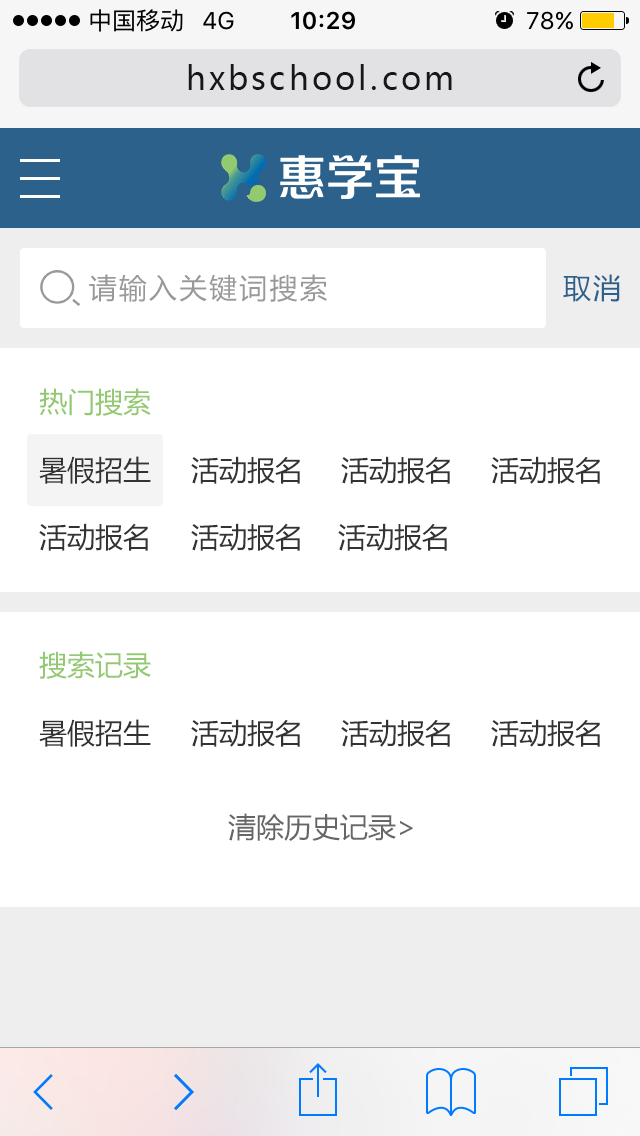
<style>
.page{position:relative;width:640px;height:1136px;background:#ffffff}
.page>*{position:absolute;margin:0}
.t1{font:32px "MicrosoftYaHei";letter-spacing:0.1em;color:#171717}
.t2{font:28px "MicrosoftYaHei";letter-spacing:0.075em;color:#999999}
.t3{font:28px "MicrosoftYaHei";letter-spacing:0.075em;color:#2c618b}
.t4{font:28px "MicrosoftYaHei";color:#93c971}
.t5{font:28px "MicrosoftYaHei";color:#333333}
.t6{font:28px "MicrosoftYaHei";color:#666666}
</style>
<div class="page">
<p class="t1" style="left:188px;top:64px;width:264px;height:26px">hxbschool.com</p>
<p class="t2" style="left:89px;top:274px;width:238px;height:28px">请输入关键词搜索</p>
<p class="t3" style="left:563px;top:274px;width:57px;height:28px">取消</p>
<p class="t4" style="left:39px;top:388px;width:112px;height:28px">热门搜索</p>
<p class="t5" style="left:39px;top:456px;width:112px;height:28px">暑假招生</p>
<p class="t5" style="left:191px;top:456px;width:109px;height:28px">活动报名</p>
<p class="t5" style="left:341px;top:456px;width:109px;height:28px">活动报名</p>
<p class="t5" style="left:491px;top:456px;width:109px;height:28px">活动报名</p>
<p class="t5" style="left:39px;top:523px;width:109px;height:28px">活动报名</p>
<p class="t5" style="left:191px;top:523px;width:109px;height:28px">活动报名</p>
<p class="t5" style="left:338px;top:523px;width:109px;height:28px">活动报名</p>
<p class="t4" style="left:39px;top:651px;width:112px;height:28px">搜索记录</p>
<p class="t5" style="left:39px;top:719px;width:112px;height:28px">暑假招生</p>
<p class="t5" style="left:191px;top:719px;width:109px;height:28px">活动报名</p>
<p class="t5" style="left:341px;top:719px;width:109px;height:28px">活动报名</p>
<p class="t5" style="left:491px;top:719px;width:109px;height:28px">活动报名</p>
<p class="t6" style="left:228px;top:813px;width:185px;height:28px">清除历史记录&gt;</p>
</div>
